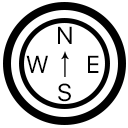
<style>
.page{position:relative;width:128px;height:128px;background:#ffffff}
.page>*{position:absolute;margin:0}
.t1{font:24.5px "SFProDisplay-Regular";letter-spacing:-0.74em;color:#000000}
</style>
<div class="page">
<p class="t1" style="left:58px;top:26px;width:14px;height:18px">N</p>
<p class="t1" style="left:26px;top:55px;width:22px;height:18px">W</p>
<p class="t1" style="left:88px;top:55px;width:11px;height:18px">E</p>
<p class="t1" style="left:58px;top:83px;width:13px;height:19px">S</p>
</div>
